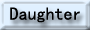
<style>
.page{position:relative;width:90px;height:30px}
.page>*{position:absolute;margin:0}
.t1{font:18px "SimHei";color:#000000}
</style>
<div class="page">
<p class="t1" style="left:10px;top:7px;width:70px;height:16px">Daughter</p>
</div>
